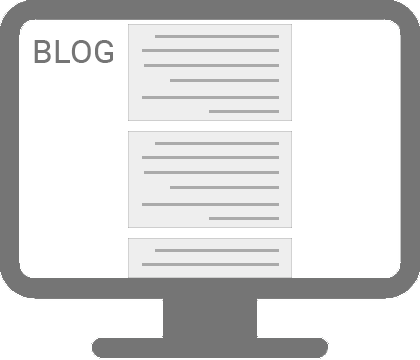
<style>
.page{position:relative;width:420px;height:360px;background:#ffffff}
.page>*{position:absolute;margin:0}
.t1{font:33.3px "Roboto-Regular";color:#757575}
</style>
<div class="page">
<p class="t1" style="left:34px;top:40px;width:79px;height:23px">BLOG</p>
</div>
